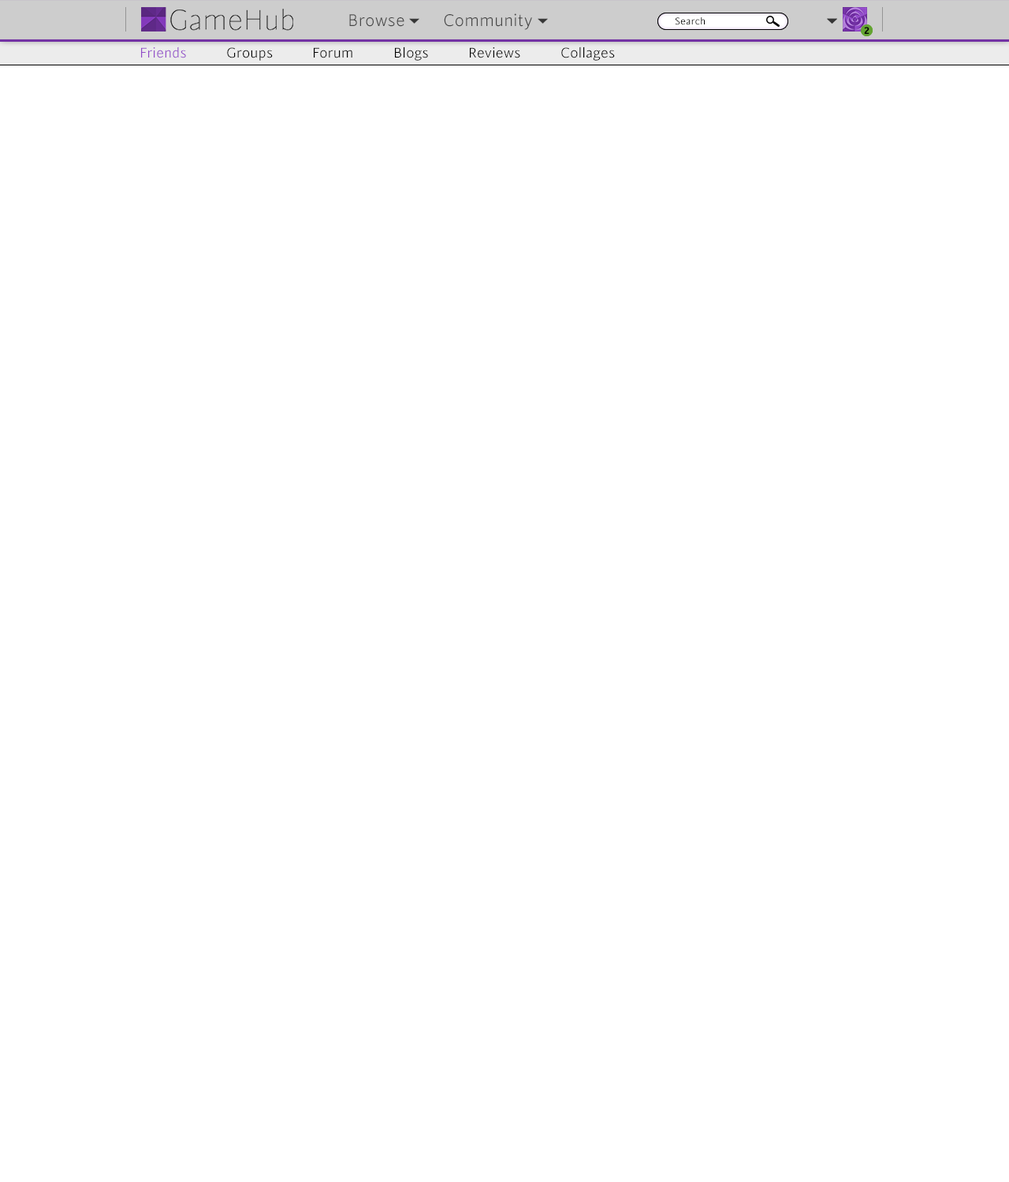
<style>
.page{position:relative;width:1009px;height:1182px;background:#ffffff}
.page>*{position:absolute;margin:0}
.t1{font:18.9px "CintaLight";color:#464646}
.t2{font:11px "CintaBook";color:#000000}
.t3{font:11px "CintaRegular-Bold";color:#000000}
.t4{font:15.8px "CintaLight";color:#924cc8}
.t5{font:15.8px "CintaLight";color:#000000}
</style>
<div class="page">
<p class="t1" style="left:349px;top:14px;width:55px;height:13px">Browse</p>
<p class="t1" style="left:444px;top:13px;width:88px;height:17px">Community</p>
<p class="t2" style="left:675px;top:17px;width:30px;height:8px">Search</p>
<p class="t2" style="left:675px;top:17px;width:30px;height:8px">Search</p>
<p class="t3" style="left:864px;top:27px;width:5px;height:7px">2</p>
<p class="t3" style="left:864px;top:27px;width:5px;height:7px">2</p>
<p class="t4" style="left:141px;top:46px;width:45px;height:12px">Friends</p>
<p class="t5" style="left:227px;top:47px;width:46px;height:14px">Groups</p>
<p class="t5" style="left:314px;top:47px;width:38px;height:11px">Forum</p>
<p class="t5" style="left:395px;top:46px;width:33px;height:15px">Blogs</p>
<p class="t5" style="left:470px;top:47px;width:50px;height:11px">Reviews</p>
<p class="t5" style="left:561px;top:46px;width:54px;height:15px">Collages</p>
</div>
